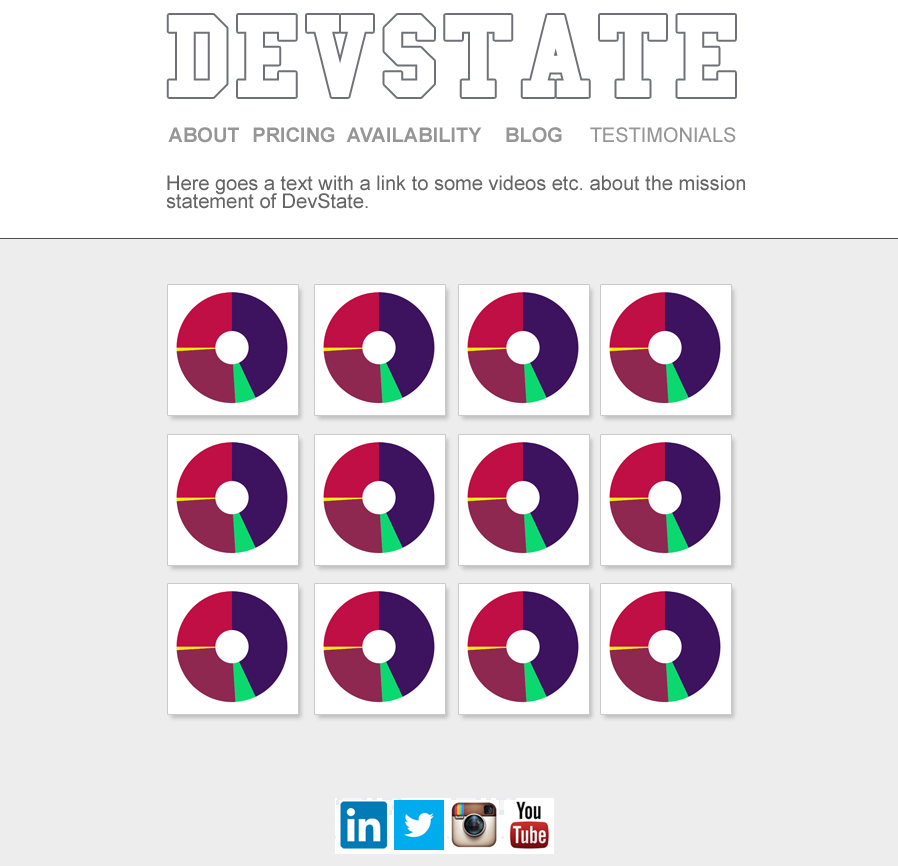
<style>
.page{position:relative;width:898px;height:866px;background:#ededed}
.page>*{position:absolute;margin:0}
.t1{font:20px "Arial-BoldMT";color:#969696}
.t2{font:20px "ArialMT";color:#969696}
.t3{font:20px/160px "ArialMT";color:#656565}
.t4{font:20px/18px "ArialMT";color:#656565}
</style>
<div class="page">
<p class="t1" style="left:168px;top:127px;width:71px;height:16px">ABOUT</p>
<p class="t1" style="left:253px;top:127px;width:82px;height:16px">PRICING</p>
<p class="t1" style="left:346px;top:127px;width:136px;height:15px">AVAILABILITY</p>
<p class="t1" style="left:506px;top:127px;width:56px;height:16px">BLOG</p>
<p class="t2" style="left:590px;top:127px;width:146px;height:16px">TESTIMONIALS</p>
<p class="t3" style="left:166px;top:175px;width:579px;height:34px">Here goes a text with a link to some videos etc. about the mission<span class="t4"><br>statement of DevState.</span></p>
</div>
